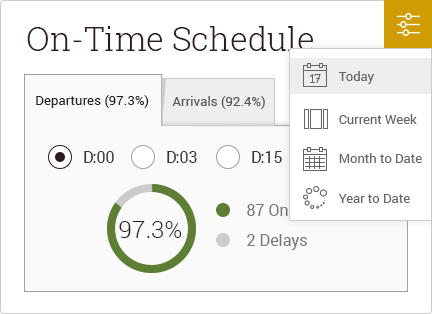
<style>
.page{position:relative;width:432px;height:314px;background:#ffffff}
.page>*{position:absolute;margin:0}
.t1{font:33px "RobotoSlab-Light";color:#2f1b1f}
.t2{font:13px "Roboto-Regular";color:#666666}
.t3{font:13px "Roboto-Regular";color:#222222}
.t4{font:13px "Roboto-Regular";color:#555555}
.t5{font:16px "Roboto-Regular";color:#333333}
.t6{font:16px "Roboto-Regular"}
.t7{font:24px "Roboto-Light";color:#2f1b1f}
.t8{font:16px "Roboto-Regular";color:#767676}
</style>
<div class="page">
<p class="t1" style="left:27px;top:26px;width:286px;height:25px">On-Time Schedule</p>
<p class="t2" style="left:338px;top:71px;width:36px;height:13px">Today</p>
<p class="t3" style="left:36px;top:95px;width:113px;height:13px">Departures (97.3%)</p>
<p class="t4" style="left:172px;top:96px;width:93px;height:13px">Arrivals (92.4%)</p>
<p class="t2" style="left:339px;top:114px;width:78px;height:10px">Current Week</p>
<p class="t5" style="left:84px;top:151px;width:30px;height:12px">D:00</p>
<p class="t5" style="left:167px;top:151px;width:30px;height:12px">D:03</p>
<p class="t5" style="left:252px;top:151px;width:30px;height:12px">D:15</p>
<p class="t2" style="left:339px;top:153px;width:83px;height:10px">Month to Date</p>
<p class="t2" style="left:338px;top:194px;width:72px;height:9px">Year to Date</p>
<p class="t6" style="left:247px;top:203px;width:81px;height:13px">87 On Time</p>
<p class="t7" style="left:119px;top:221px;width:63px;height:17px">97.3%</p>
<p class="t8" style="left:247px;top:234px;width:60px;height:16px">2 Delays</p>
</div>
